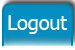
<style>
.page{position:relative;width:75px;height:50px}
.page>*{position:absolute;margin:0}
.t1{font:19.7px "Tahoma";color:#ffffff}
</style>
<div class="page">
<p class="t1" style="left:8px;top:15px;width:59px;height:19px">Logout</p>
</div>
